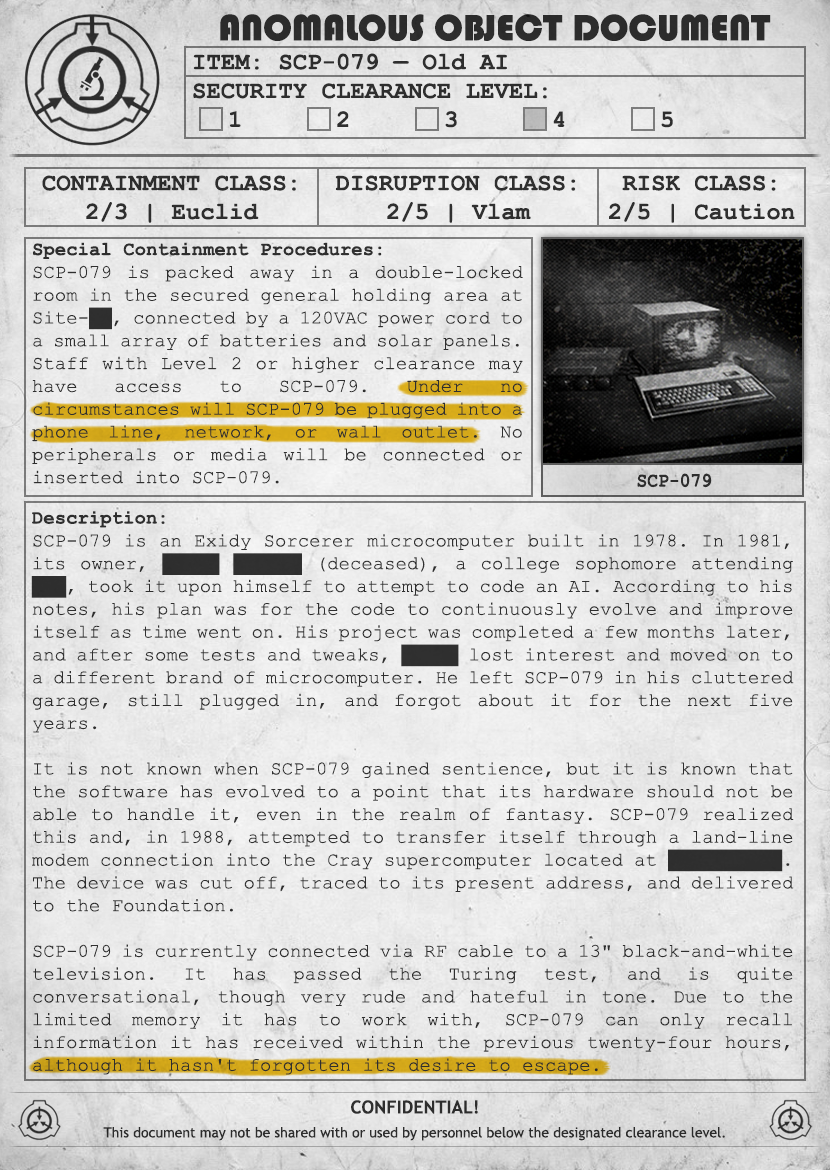
<style>
.page{position:relative;width:830px;height:1170px}
.page>*{position:absolute;margin:0}
.t1{font:38px "Bauhaus93";color:#333333;text-transform:uppercase}
.t2{font:24px "CourierNewPS-BoldMT";color:#333333;text-transform:uppercase}
.t3{font:24px "CourierNewPS-BoldMT";color:#333333}
.t4{font:19px "CourierNewPSMT";color:#333333}
.t5{font:19px "CourierNewPS-BoldMT";color:#333333}
.t6{font:20.1px "CourierNewPS-BoldMT";color:#333333;scale:0.9 1}
.t7{font:14px/24px "TrebuchetMS";color:#333333}
.t8{font:18px/24px "TrebuchetMS-Bold";color:#333333}
</style>
<div class="page">
<p class="t1" style="left:220px;top:14px;width:551px;height:27px">anomalous object document</p>
<p class="t2" style="left:193px;top:53px;width:480px;height:75px"><span class="t3">ITEM: SCP-079 — Old AI<br></span>Security CLEARANCE LEVEL:<span class="t3"> <br> 1   2   3   4   5</span></p>
<p class="t3" style="left:42px;top:175px;width:254px;height:48px;text-align:center">CONTAINMENT CLASS:<br>2/3 | Euclid</p>
<p class="t3" style="left:335px;top:175px;width:241px;height:48px;text-align:center">DISRUPTION CLASS:<br>2/5 | Vlam</p>
<p class="t3" style="left:609px;top:175px;width:186px;height:48px;text-align:center">RISK CLASS:<br>2/5 | Caution</p>
<p class="t4" style="left:32px;top:242px;width:491px;height:242px;text-align:justify"><span class="t5">Special Containment Procedures:<br></span>SCP-079 is packed away in a double-locked room in the secured general holding area at Site-██, connected by a 120VAC power cord to a small array of batteries and solar panels. Staff with Level 2 or higher clearance may have access to SCP-079. Under no circumstances will SCP-079 be plugged into a phone line, network, or wall outlet. No peripherals or media will be connected or inserted into SCP-079.</p>
<p class="t6" style="left:637px;top:473px;width:75px;height:15px">SCP-079</p>
<p class="t4" style="left:31px;top:511px;width:763px;height:564px;text-align:justify"><span class="t5">Description:<br></span>SCP-079 is an Exidy Sorcerer microcomputer built in 1978. In 1981, its owner, █████ ██████ (deceased), a college sophomore attending ███, took it upon himself to attempt to code an AI. According to his notes, his plan was for the code to continuously evolve and improve itself as time went on. His project was completed a few months later, and after some tests and tweaks, █████ lost interest and moved on to a different brand of microcomputer. He left SCP-079 in his cluttered garage, still plugged in, and forgot about it for the next five years.<br><br>It is not known when SCP-079 gained sentience, but it is known that the software has evolved to a point that its hardware should not be able to handle it, even in the realm of fantasy. SCP-079 realized this and, in 1988, attempted to transfer itself through a land-line modem connection into the Cray supercomputer located at ██████████. The device was cut off, traced to its present address, and delivered to the Foundation.<br><br>SCP-079 is currently connected via RF cable to a 13" black-and-white television. It has passed the Turing test, and is quite conversational, though very rude and hateful in tone. Due to the limited memory it has to work with, SCP-079 can only recall information it has received within the previous twenty-four hours, although it hasn't forgotten its desire to escape.</p>
<p class="t7" style="left:103px;top:1100px;width:622px;height:41px;text-align:center"><span class="t8">CONFIDENTIAL!<br></span>This document may not be shared with or used by personnel below the designated clearance level.</p>
</div>
